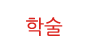
<style>
.page{position:relative;width:93px;height:53px;background:#ffffff}
.page>*{position:absolute;margin:0}
.t1{font:19.9px "NanumGothic";color:#dc241f}
</style>
<div class="page">
<p class="t1" style="left:26px;top:17px;width:37px;height:19px">학술</p>
</div>
